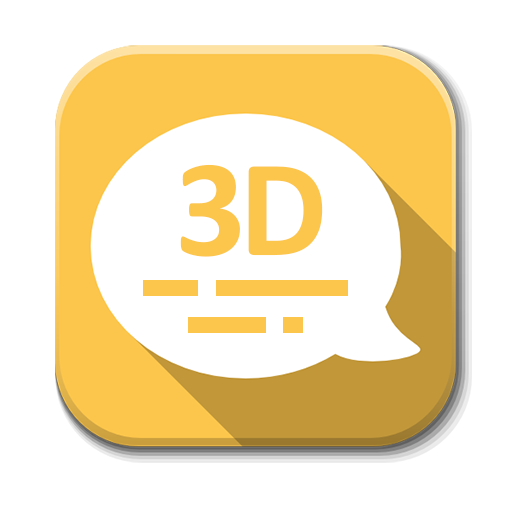
<style>
.page{position:relative;width:512px;height:512px;background:#ffffff}
.page>*{position:absolute;margin:0}
.t1{font:140.2px "Calibri-Bold";letter-spacing:-0.05em;color:#fcc64c}
</style>
<div class="page">
<p class="t1" style="left:180px;top:164px;width:143px;height:93px">3D</p>
</div>
